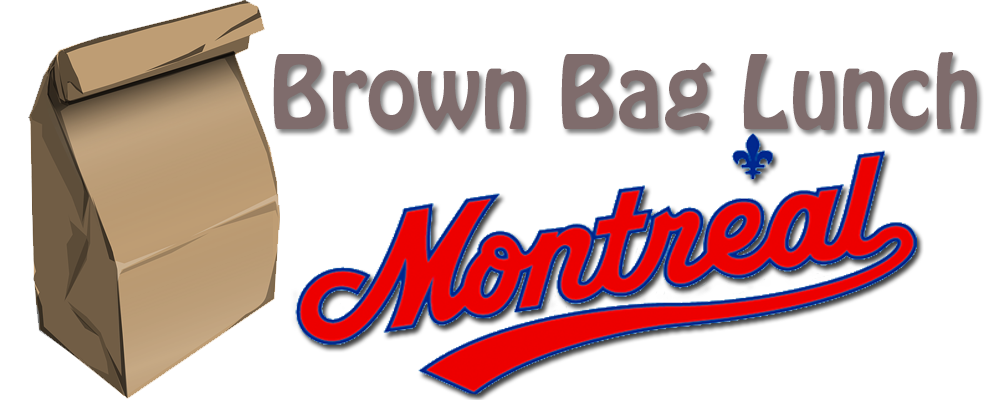
<style>
.page{position:relative;width:1000px;height:400px;background:#ffffff}
.page>*{position:absolute;margin:0}
.t1{font:90px "HoboStd";color:#7f6c6c}
</style>
<div class="page">
<p class="t1" style="left:273px;top:52px;width:704px;height:78px">Brown Bag Lunch</p>
</div>
